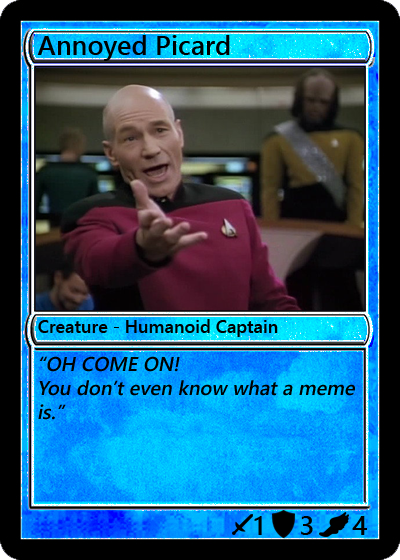
<style>
.page{position:relative;width:400px;height:560px}
.page>*{position:absolute;margin:0}
.t1{font:27px "YuGothicUI-Semibold";color:#000000}
.t2{font:18px "YuGothicUI-Semibold";color:#000000}
.t3{font:20px "YuGothicUI-Semibold";color:#000000;font-style:italic}
</style>
<div class="page">
<p class="t1" style="left:37px;top:35px;width:193px;height:26px">Annoyed Picard</p>
<p class="t2" style="left:38px;top:319px;width:240px;height:18px">Creature - Humanoid Captain</p>
<p class="t3" style="left:38px;top:356px;width:317px;height:64px">“OH COME ON! <br>You don’t even know what a meme is.”</p>
<p class="t1" style="left:254px;top:516px;width:8px;height:19px">1</p>
<p class="t1" style="left:301px;top:516px;width:12px;height:19px">3</p>
<p class="t1" style="left:352px;top:516px;width:15px;height:19px">4</p>
</div>
